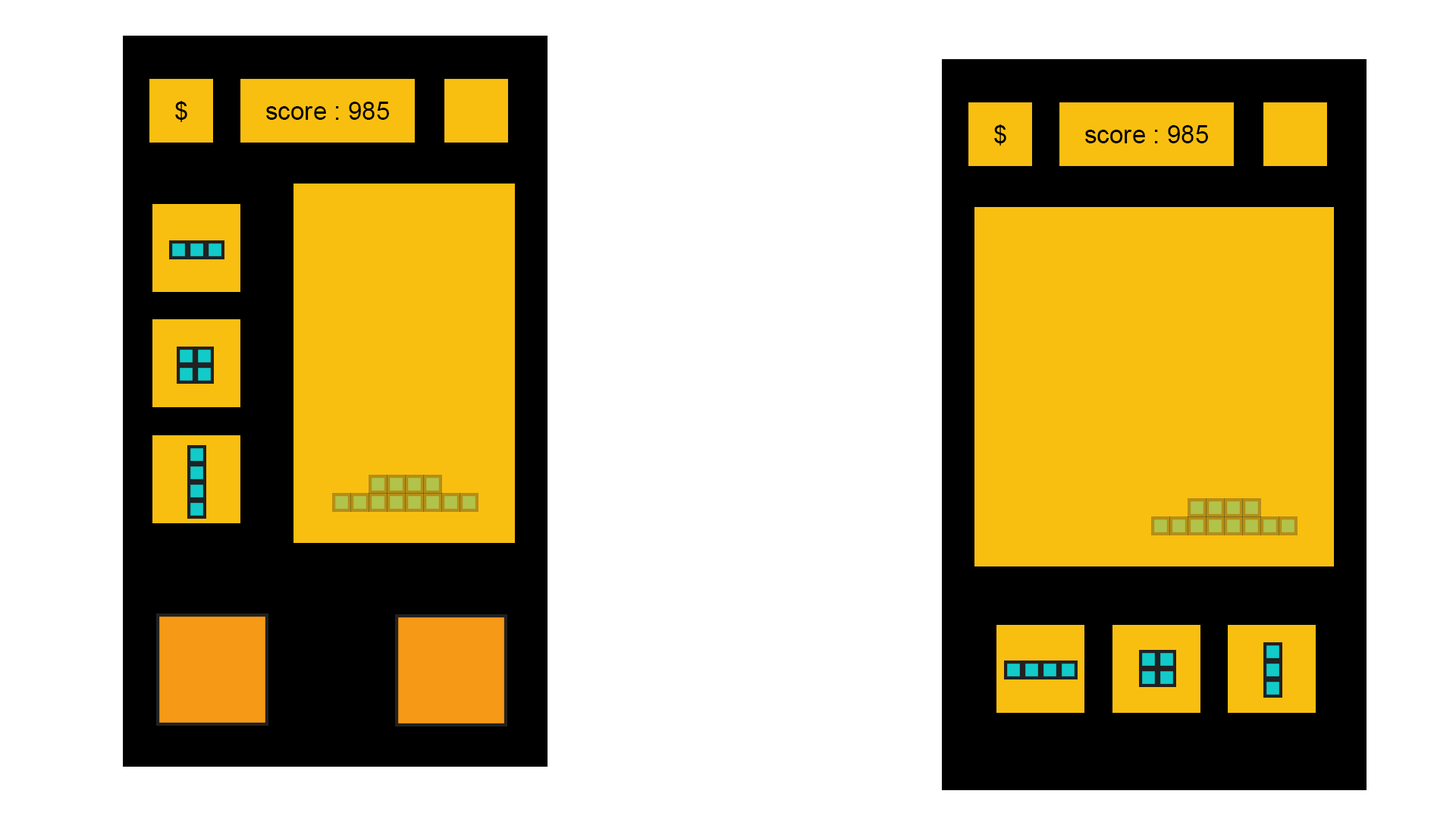
<style>
.page{position:relative;width:1456px;height:819px;background:#ffffff}
.page>*{position:absolute;margin:0}
.t1{font:25.3px "ArialMT";color:#000000}
</style>
<div class="page">
<p class="t1" style="left:175px;top:101px;width:12px;height:21px">$</p>
<p class="t1" style="left:266px;top:102px;width:123px;height:18px">score : 985</p>
<p class="t1" style="left:994px;top:124px;width:12px;height:22px">$</p>
<p class="t1" style="left:1085px;top:125px;width:123px;height:18px">score : 985</p>
</div>
